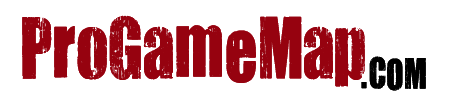
<style>
.page{position:relative;width:470px;height:110px;background:#ffffff}
.page>*{position:absolute;margin:0}
.t1{font:72px "YouAreLoved";color:#96020f}
.t2{font:36px "YouAreLoved";color:#000000}
</style>
<div class="page">
<p class="t1" style="left:22px;top:15px;width:343px;height:72px">ProGameMap</p>
<p class="t1" style="left:22px;top:15px;width:343px;height:72px">ProGameMap</p>
<p class="t2" style="left:361px;top:56px;width:65px;height:35px">.COM</p>
<p class="t2" style="left:361px;top:56px;width:65px;height:35px">.COM</p>
</div>
